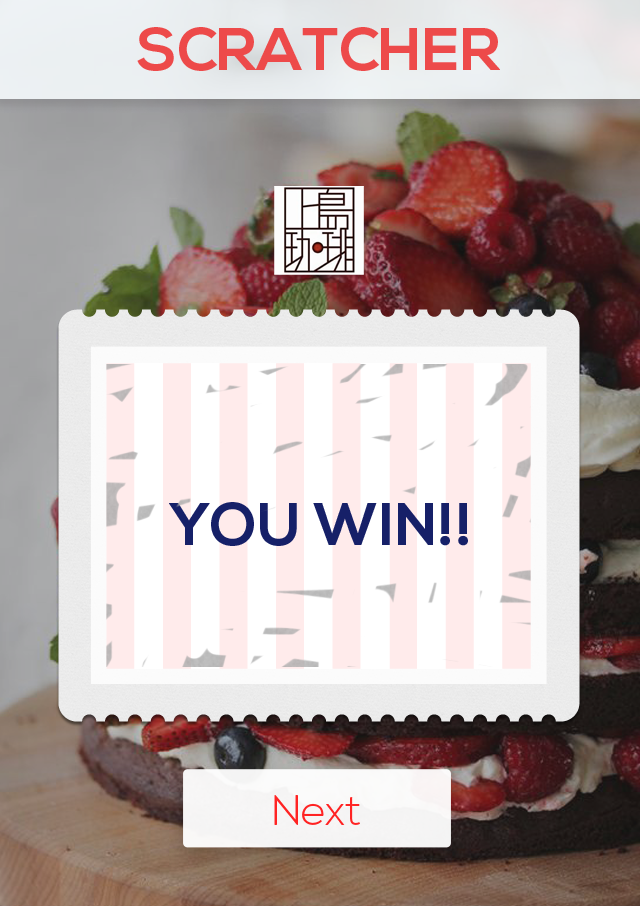
<style>
.page{position:relative;width:640px;height:906px}
.page>*{position:absolute;margin:0}
.t1{font:60px "NexaBold";color:#ed4a4a}
.t2{font:60px "NexaBold";color:#162068}
.t3{font:42.7px "NexaLight";letter-spacing:-0.02em;color:#ff2323}
</style>
<div class="page">
<p class="t1" style="left:137px;top:27px;width:363px;height:44px">SCRATCHER</p>
<p class="t2" style="left:169px;top:502px;width:299px;height:44px">YOU WIN!!</p>
<p class="t3" style="left:274px;top:795px;width:86px;height:30px">Next</p>
</div>
